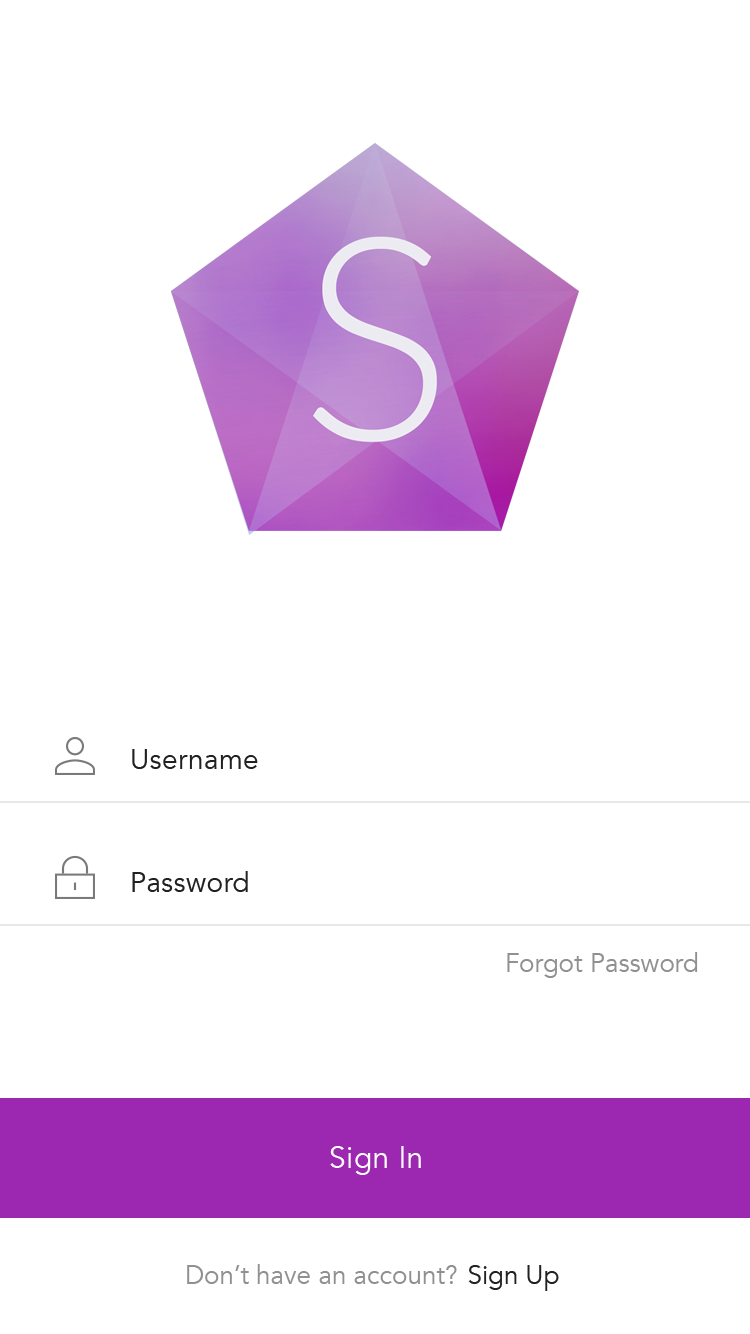
<style>
.page{position:relative;width:750px;height:1334px;background:#ffffff}
.page>*{position:absolute;margin:0}
.t1{font:28px "Avenir-Book";letter-spacing:0.014em;color:#212121}
.t2{font:26px "Avenir-Book";color:#909090}
.t3{font:30px "Avenir-Book";letter-spacing:0.014em;color:#ffffff}
.t4{font:26px "Avenir-Book";color:#212121}
</style>
<div class="page">
<p class="t1" style="left:132px;top:749px;width:126px;height:20px">Username</p>
<p class="t1" style="left:132px;top:871px;width:116px;height:21px">Password</p>
<p class="t2" style="left:507px;top:952px;width:191px;height:26px">Forgot Password</p>
<p class="t3" style="left:330px;top:1146px;width:91px;height:29px">Sign In</p>
<p class="t2" style="left:187px;top:1264px;width:270px;height:20px">Don’t have an account?</p>
<p class="t4" style="left:468px;top:1265px;width:91px;height:26px">Sign Up</p>
</div>
